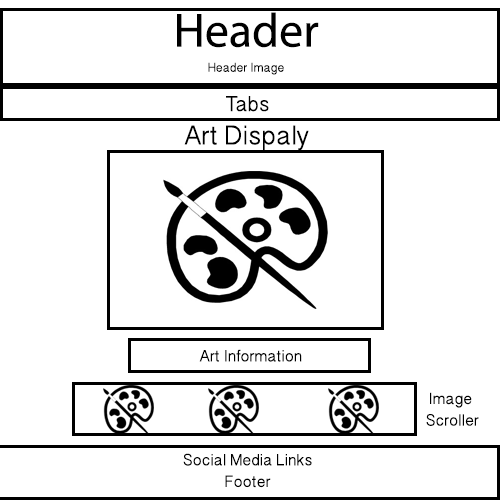
<style>
.page{position:relative;width:500px;height:500px;background:#ffffff}
.page>*{position:absolute;margin:0}
.t1{font:48px "MyriadPro-Regular";color:#000000}
.t2{font:14px "OriyaSangamMN";color:#000000}
.t3{font:24px "OriyaSangamMN";color:#000000}
.t4{font:30px "OriyaSangamMN";color:#000000}
.t5{font:18px "OriyaSangamMN";color:#000000}
</style>
<div class="page">
<p class="t1" style="left:177px;top:12px;width:142px;height:36px">Header</p>
<p class="t2" style="left:208px;top:62px;width:76px;height:13px">Header Image</p>
<p class="t3" style="left:226px;top:96px;width:43px;height:16px">Tabs</p>
<p class="t4" style="left:184px;top:125px;width:125px;height:26px">Art Dispaly</p>
<p class="t5" style="left:199px;top:349px;width:103px;height:13px">Art Information</p>
<p class="t5" style="left:426px;top:392px;width:53px;height:34px;text-align:center">Image <br>Scroller</p>
<p class="t5" style="left:183px;top:453px;width:129px;height:35px;text-align:center">Social Media Links<br>Footer</p>
</div>
